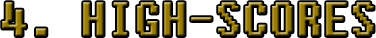
<style>
.page{position:relative;width:376px;height:38px;background:#ffffff}
.page>*{position:absolute;margin:0}
.t1{font:48px "Fixedsys";scale:0.9 1}
</style>
<div class="page">
<p class="t1" style="left:2px;top:2px;width:372px;height:34px">4. HIGH-SCORES</p>
</div>
